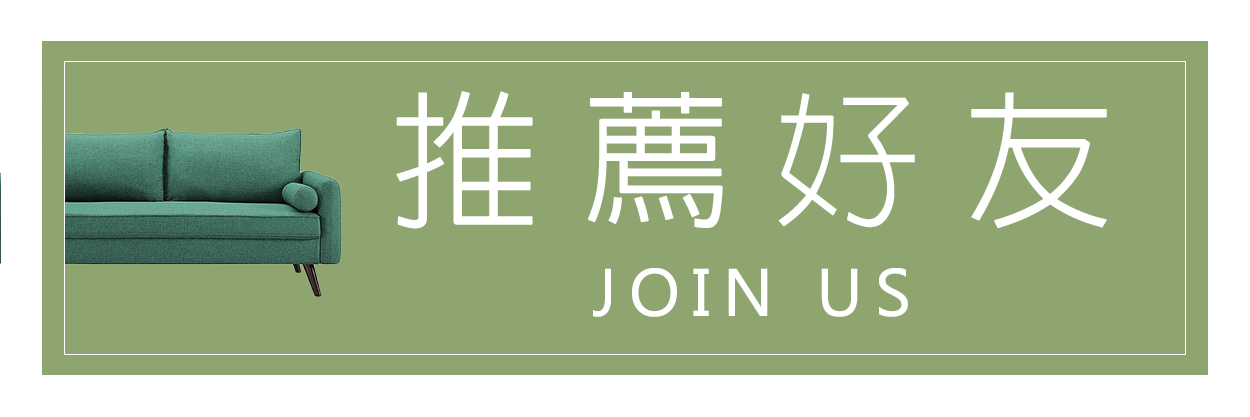
<style>
.page{position:relative;width:1250px;height:417px;background:#8fa570}
.page>*{position:absolute;margin:0}
.t1{font:150px "LinGothic-Light";letter-spacing:0.25em;color:#ffffff;font-weight:bold}
.t2{font:66.7px "Ebrima";letter-spacing:0.165em;color:#ffffff;font-weight:bold}
</style>
<div class="page">
<p class="t1" style="left:396px;top:91px;width:711px;height:138px">推薦好友</p>
<p class="t2" style="left:593px;top:268px;width:315px;height:49px">JOIN US</p>
</div>
